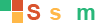
<style>
.page{position:relative;width:97px;height:23px;background:#ffffff}
.page>*{position:absolute;margin:0}
.t1{font:22px "Arial-BoldMT";letter-spacing:0.05em;color:#da542e}
.t2{font:22px "Arial-BoldMT";letter-spacing:0.05em;color:#ffffff}
.t3{font:22px "Arial-BoldMT";letter-spacing:0.05em;color:#ffb848}
.t4{font:22px "Arial-BoldMT";letter-spacing:0.05em;color:#28b779}
</style>
<div class="page">
<p class="t1" style="left:27px;top:4px;width:68px;height:16px">S<span class="t2">i</span><span class="t3">s</span><span class="t2">e</span><span class="t4">m</span></p>
</div>
